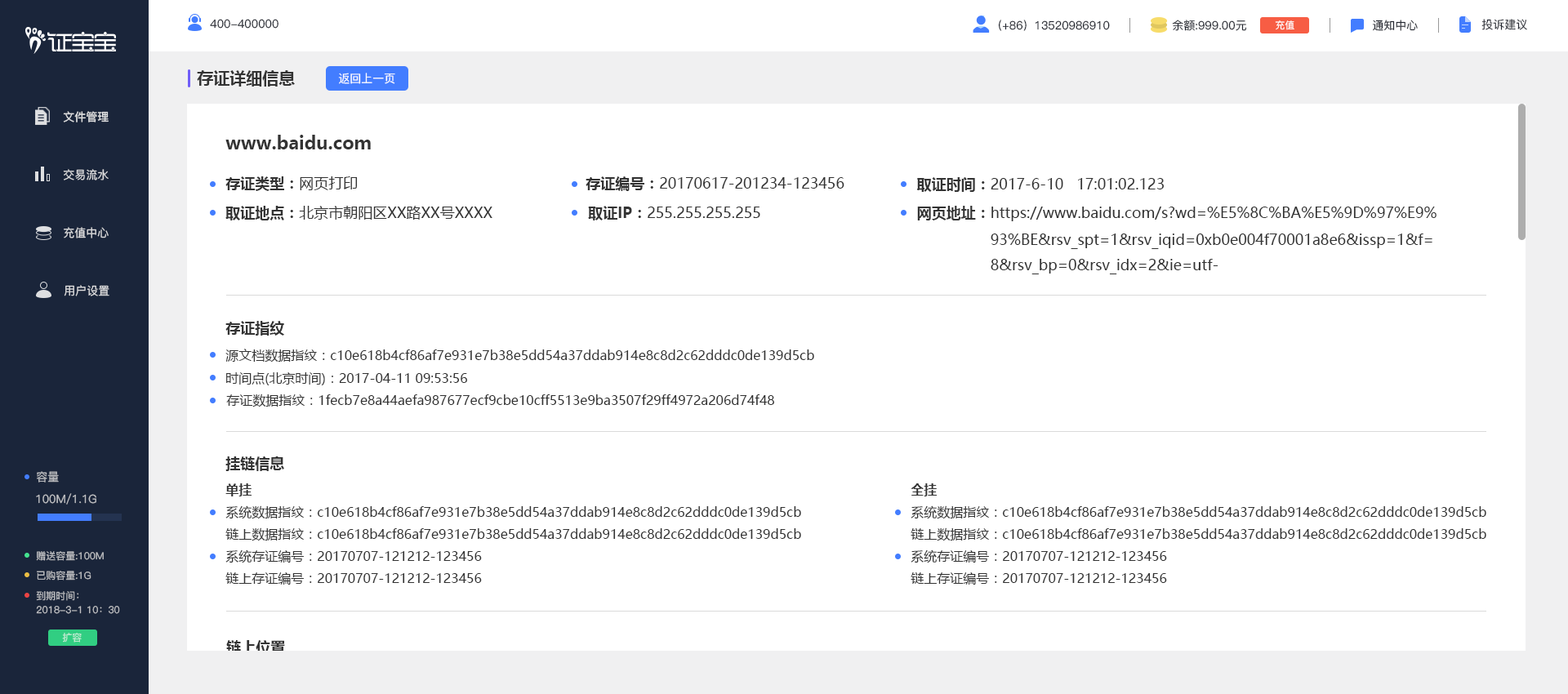
<style>
.page{position:relative;width:1568px;height:694px;background:#ffffff}
.page>*{position:absolute;margin:0}
.t1{font:11.4px "PingFang-SC-Medium";color:#232730}
.t2{font:9.8px "PingFang-SC-Medium";color:#ffffff}
.t3{font:16.3px "MicrosoftYaHei-Bold";color:#333333}
.t4{font:11.4px "PingFang-SC-Medium";color:#ffffff}
.t5{font:11.4px "PingFang-SC-Bold";color:#dedfe1}
.t6{font:18px "MicrosoftYaHei-Bold";color:#333333}
.t7{font:11.4px "PingFang-SC-Medium";color:#dfdfe1}
.t8{font:14.7px "MicrosoftYaHei-Bold";color:#333333}
.t9{font:14.7px "MicrosoftYaHei";color:#333333}
.t10{font:13.1px "MicrosoftYaHei";color:#333333}
.t11{font:11.4px "PingFang-SC-Medium";color:#c1c2c6}
.t12{font:13.1px "MicrosoftYaHei-Bold";color:#333333}
.t13{font:9.8px "PingFang-SC-Medium";color:#c1c2c6}
.t14{font:9.8px "PingFang-SC-Medium"}
</style>
<div class="page">
<p class="t1" style="left:210px;top:19px;width:68px;height:10px">400-400000</p>
<p class="t1" style="left:998px;top:20px;width:112px;height:11px">（+86）13520986910</p>
<p class="t1" style="left:1172px;top:20px;width:75px;height:11px">余额:999.00元</p>
<p class="t2" style="left:1275px;top:20px;width:19px;height:10px">充值</p>
<p class="t1" style="left:1372px;top:20px;width:46px;height:11px">通知中心</p>
<p class="t1" style="left:1481px;top:19px;width:46px;height:11px">投诉建议</p>
<p class="t3" style="left:197px;top:70px;width:98px;height:17px">存证详细信息</p>
<p class="t4" style="left:338px;top:73px;width:57px;height:11px">返回上一页</p>
<p class="t5" style="left:63px;top:111px;width:46px;height:11px">文件管理</p>
<p class="t6" style="left:225px;top:135px;width:146px;height:14px">www.baidu.com</p>
<p class="t7" style="left:63px;top:169px;width:46px;height:11px">交易流水</p>
<p class="t8" style="left:225px;top:176px;width:133px;height:15px">存证类型：<span class="t9">网页打印</span></p>
<p class="t9" style="left:586px;top:176px;width:258px;height:15px"><span class="t8">存证编号：</span>20170617-201234-123456</p>
<p class="t9" style="left:917px;top:177px;width:247px;height:15px"><span class="t8">取证时间：</span>2017-6-10   17:01:02.123</p>
<p class="t9" style="left:225px;top:206px;width:267px;height:14px"><span class="t8">取证地点：</span>北京市朝阳区XX路XX号XXXX</p>
<p class="t9" style="left:588px;top:206px;width:172px;height:14px"><span class="t8">取证IP：</span>255.255.255.255</p>
<p class="t9" style="left:917px;top:206px;width:520px;height:15px"><span class="t8">网页地址：</span>https://www.baidu.com/s?wd=%E5%8C%BA%E5%9D%97%E9%</p>
<p class="t7" style="left:64px;top:227px;width:45px;height:11px">充值中心</p>
<p class="t9" style="left:991px;top:234px;width:441px;height:15px">93%BE&amp;rsv_spt=1&amp;rsv_iqid=0xb0e004f70001a8e6&amp;issp=1&amp;f=</p>
<p class="t9" style="left:991px;top:259px;width:227px;height:15px">8&amp;rsv_bp=0&amp;rsv_idx=2&amp;ie=utf-</p>
<p class="t7" style="left:64px;top:285px;width:45px;height:11px">用户设置</p>
<p class="t8" style="left:225px;top:321px;width:59px;height:15px">存证指纹</p>
<p class="t10" style="left:225px;top:349px;width:589px;height:14px">源文档数据指纹：c10e618b4cf86af7e931e7b38e5dd54a37ddab914e8c8d2c62dddc0de139d5cb</p>
<p class="t10" style="left:226px;top:372px;width:241px;height:13px">时间点(北京时间)：2017-04-11 09:53:56</p>
<p class="t10" style="left:226px;top:394px;width:548px;height:14px">存证数据指纹：1fecb7e8a44aefa987677ecf9cbe10cff5513e9ba3507f29ff4972a206d74f48</p>
<p class="t8" style="left:225px;top:457px;width:59px;height:14px">挂链信息</p>
<p class="t11" style="left:37px;top:471px;width:22px;height:12px">容量</p>
<p class="t12" style="left:225px;top:483px;width:27px;height:14px">单挂</p>
<p class="t12" style="left:911px;top:483px;width:26px;height:14px">全挂</p>
<p class="t11" style="left:36px;top:493px;width:60px;height:12px">100M/1.1G</p>
<p class="t10" style="left:225px;top:506px;width:576px;height:13px">系统数据指纹：c10e618b4cf86af7e931e7b38e5dd54a37ddab914e8c8d2c62dddc0de139d5cb</p>
<p class="t10" style="left:911px;top:506px;width:575px;height:13px">系统数据指纹：c10e618b4cf86af7e931e7b38e5dd54a37ddab914e8c8d2c62dddc0de139d5cb</p>
<p class="t10" style="left:225px;top:528px;width:576px;height:13px">链上数据指纹：c10e618b4cf86af7e931e7b38e5dd54a37ddab914e8c8d2c62dddc0de139d5cb</p>
<p class="t10" style="left:911px;top:528px;width:575px;height:13px">链上数据指纹：c10e618b4cf86af7e931e7b38e5dd54a37ddab914e8c8d2c62dddc0de139d5cb</p>
<p class="t13" style="left:36px;top:551px;width:68px;height:10px">赠送容量:100M</p>
<p class="t10" style="left:225px;top:550px;width:257px;height:14px">系统存证编号：20170707-121212-123456</p>
<p class="t10" style="left:911px;top:550px;width:256px;height:14px">系统存证编号：20170707-121212-123456</p>
<p class="t13" style="left:37px;top:571px;width:54px;height:10px">已购容量:1G</p>
<p class="t10" style="left:225px;top:572px;width:257px;height:13px">链上存证编号：20170707-121212-123456</p>
<p class="t10" style="left:911px;top:572px;width:256px;height:13px">链上存证编号：20170707-121212-123456</p>
<p class="t13" style="left:36px;top:591px;width:43px;height:10px">到期时间：</p>
<p class="t13" style="left:36px;top:606px;width:84px;height:8px">2018-3-1 10：30</p>
<p class="t14" style="left:62px;top:633px;width:20px;height:10px">扩容</p>
<p class="t8" style="left:226px;top:640px;width:59px;height:15px">链上位置</p>
</div>
